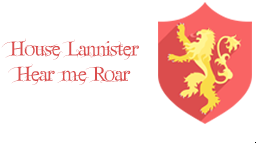
<style>
.page{position:relative;width:256px;height:144px;background:#ffffff}
.page>*{position:absolute;margin:0}
.t1{font:20.9px "FairydustB";color:#db4d4d}
</style>
<div class="page">
<p class="t1" style="left:1px;top:38px;width:138px;height:47px">House Lannister<br> Hear me Roar</p>
</div>
